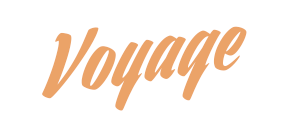
<style>
.page{position:relative;width:300px;height:120px;background:#ffffff}
.page>*{position:absolute;margin:0}
.t1{font:107px "VentographyPersonalUseOnly";letter-spacing:0.02em;color:#eba368}
</style>
<div class="page">
<p class="t1" style="left:42px;top:26px;width:205px;height:85px;rotate:-8deg">Voyage</p>
</div>
